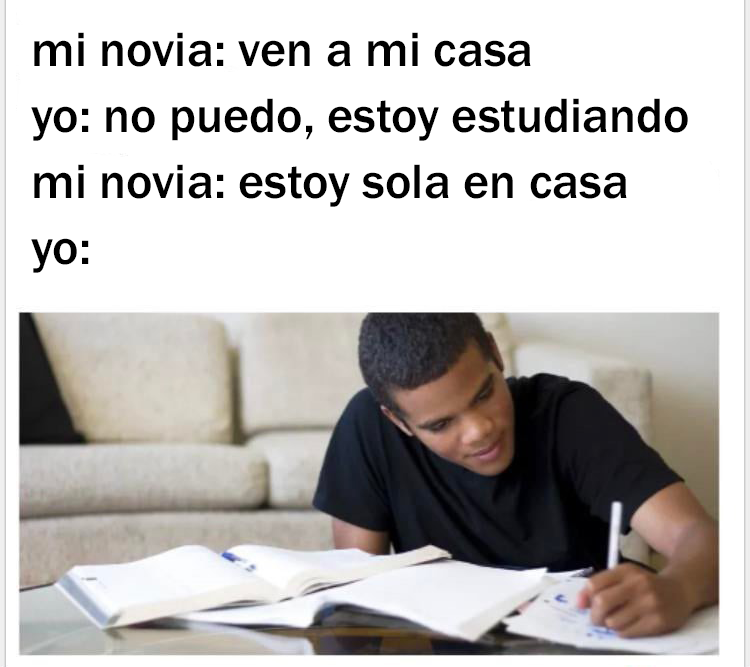
<style>
.page{position:relative;width:750px;height:667px;background:#ffffff}
.page>*{position:absolute;margin:0}
.t1{font:49.9px "FranklinGothic-Medium";color:#000000}
</style>
<div class="page">
<p class="t1" style="left:31px;top:32px;width:657px;height:241px">mi novia: ven a mi casa<br>yo: no puedo, estoy estudiando<br>mi novia: estoy sola en casa<br>yo:</p>
</div>
